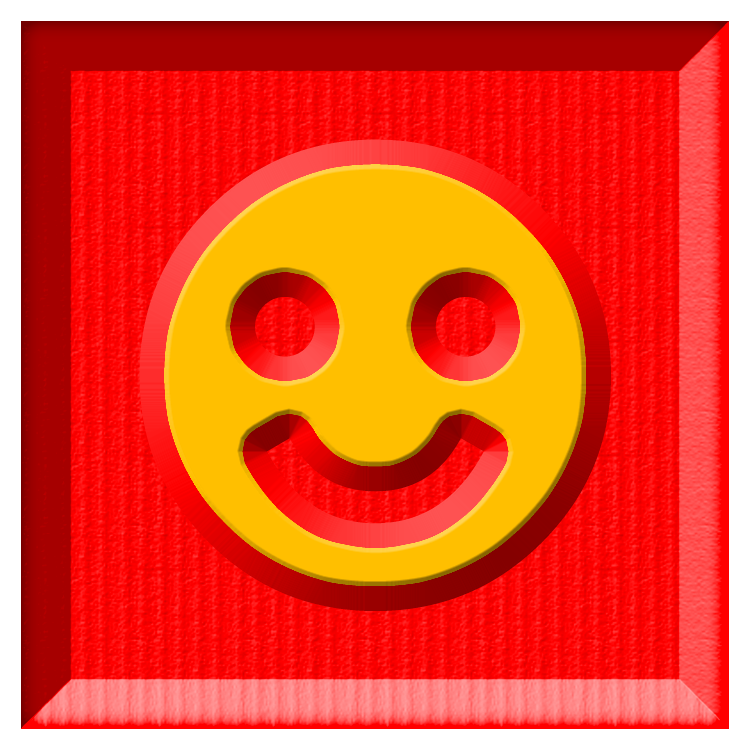
<style>
.page{position:relative;width:750px;height:750px}
.page>*{position:absolute;margin:0}
.t1{font:756.9px "Arial-BoldMT"}
</style>
<div class="page">
<p class="t1" style="left:139px;top:139px;width:472px;height:472px">☻</p>
</div>
